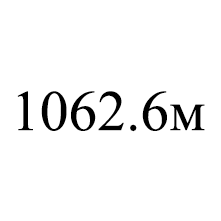
<style>
.page{position:relative;width:221px;height:221px;background:#ffffff}
.page>*{position:absolute;margin:0}
.t1{font:57.5px "TimesNewRomanPSMT";color:#000000}
</style>
<div class="page">
<p class="t1" style="left:17px;top:91px;width:188px;height:41px">1062.6м</p>
</div>
